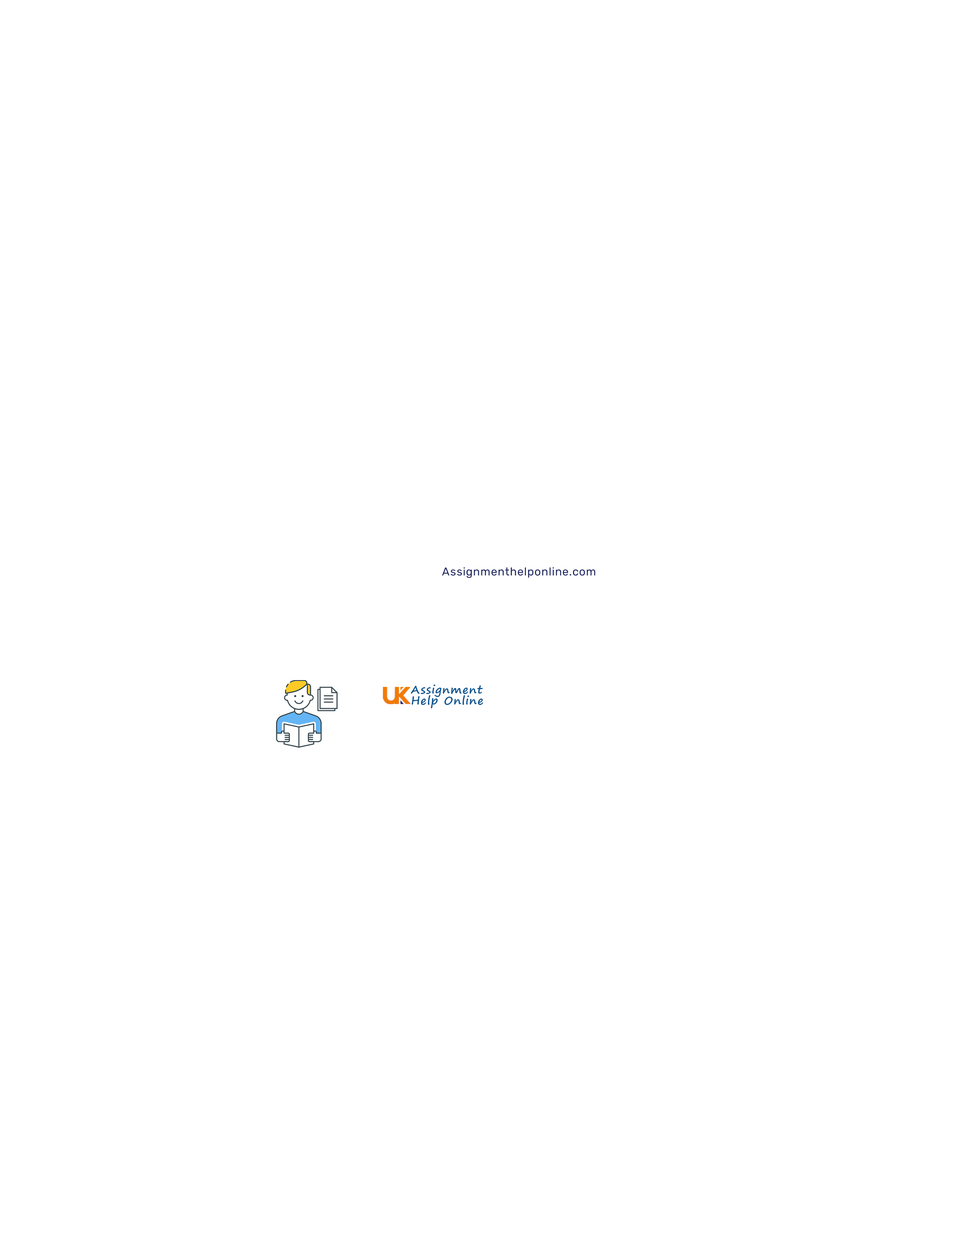
<style>
.page{position:relative;width:960px;height:1242px;background:#ffffff}
.page>*{position:absolute;margin:0}
.t1{font:11.3px "Rubik-Regular";letter-spacing:0.05em;color:#232962}
.t2{font:11.4px/10.8px "SegoePrint-Bold";letter-spacing:0.05em;color:#0a5591}
</style>
<div class="page">
<p class="t1" style="left:442px;top:567px;width:153px;height:11px">Assignmenthelponline.com</p>
<p class="t2" style="left:411px;top:685px;width:72px;height:23px">Assignment<br>Help Online</p>
</div>
